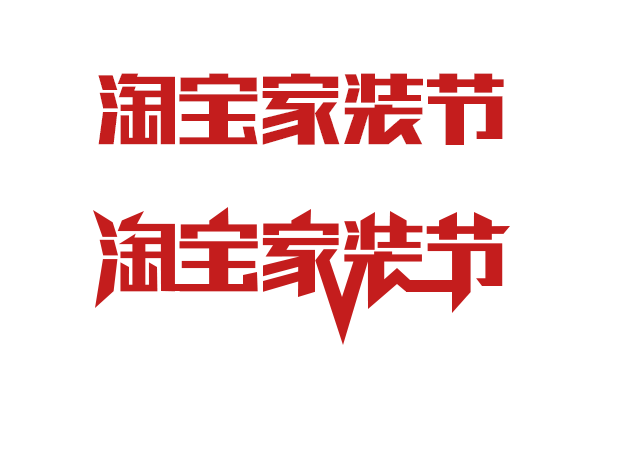
<style>
.page{position:relative;width:624px;height:449px;background:#ffffff}
.page>*{position:absolute;margin:0}
.t1{font:83px "Tensentype-XiChaoHeiJ";letter-spacing:-0.01em;color:#c41d1d}
</style>
<div class="page">
<p class="t1" style="left:98px;top:73px;width:406px;height:72px">淘宝家装节</p>
</div>
